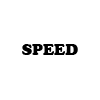
<style>
.page{position:relative;width:100px;height:100px;background:#ffffff}
.page>*{position:absolute;margin:0}
.t1{font:16px "CooperBlack";color:#000000}
</style>
<div class="page">
<p class="t1" style="left:22px;top:44px;width:56px;height:11px">SPEED</p>
</div>
